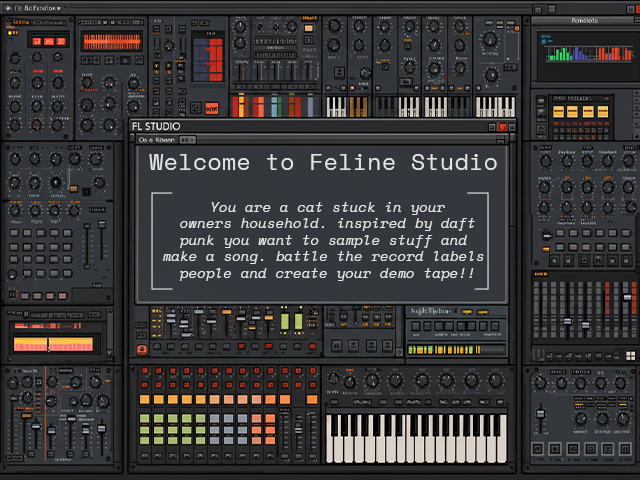
<style>
.page{position:relative;width:640px;height:480px}
.page>*{position:absolute;margin:0}
.t1{font:23px "SpaceMono-Regular";letter-spacing:0.02em;color:#e5e5e5}
.t2{font:13.8px "SpaceMono-Italic";letter-spacing:0.02em;color:#e5e5e5}
</style>
<div class="page">
<p class="t1" style="left:149px;top:154px;width:348px;height:16px">Welcome to Feline Studio</p>
<p class="t2" style="left:162px;top:202px;width:322px;height:79px;text-align:center">You are a cat stuck in your<br>owners household. inspired by daft<br>punk you want to sample stuff and <br>make a song. battle the record labels <br>people and create your demo tape!!</p>
</div>
